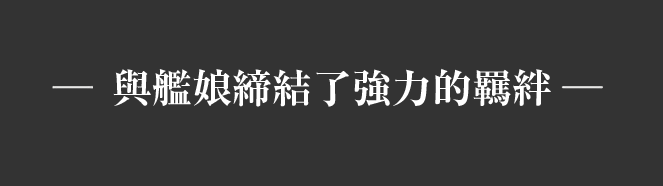
<style>
.page{position:relative;width:663px;height:186px;background:#333333}
.page>*{position:absolute;margin:0}
.t1{font:40px "RyuminPr6N-ExBold";color:#ffffff}
</style>
<div class="page">
<p class="t1" style="left:113px;top:68px;width:438px;height:39px">與艦娘締結了強力的羈絆</p>
</div>
